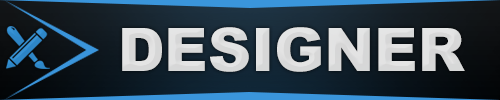
<style>
.page{position:relative;width:500px;height:100px}
.page>*{position:absolute;margin:0}
.t1{font:60px "Arial-Black";color:#dbdcdc}
</style>
<div class="page">
<p class="t1" style="left:122px;top:27px;width:343px;height:45px">DESIGNER</p>
</div>
